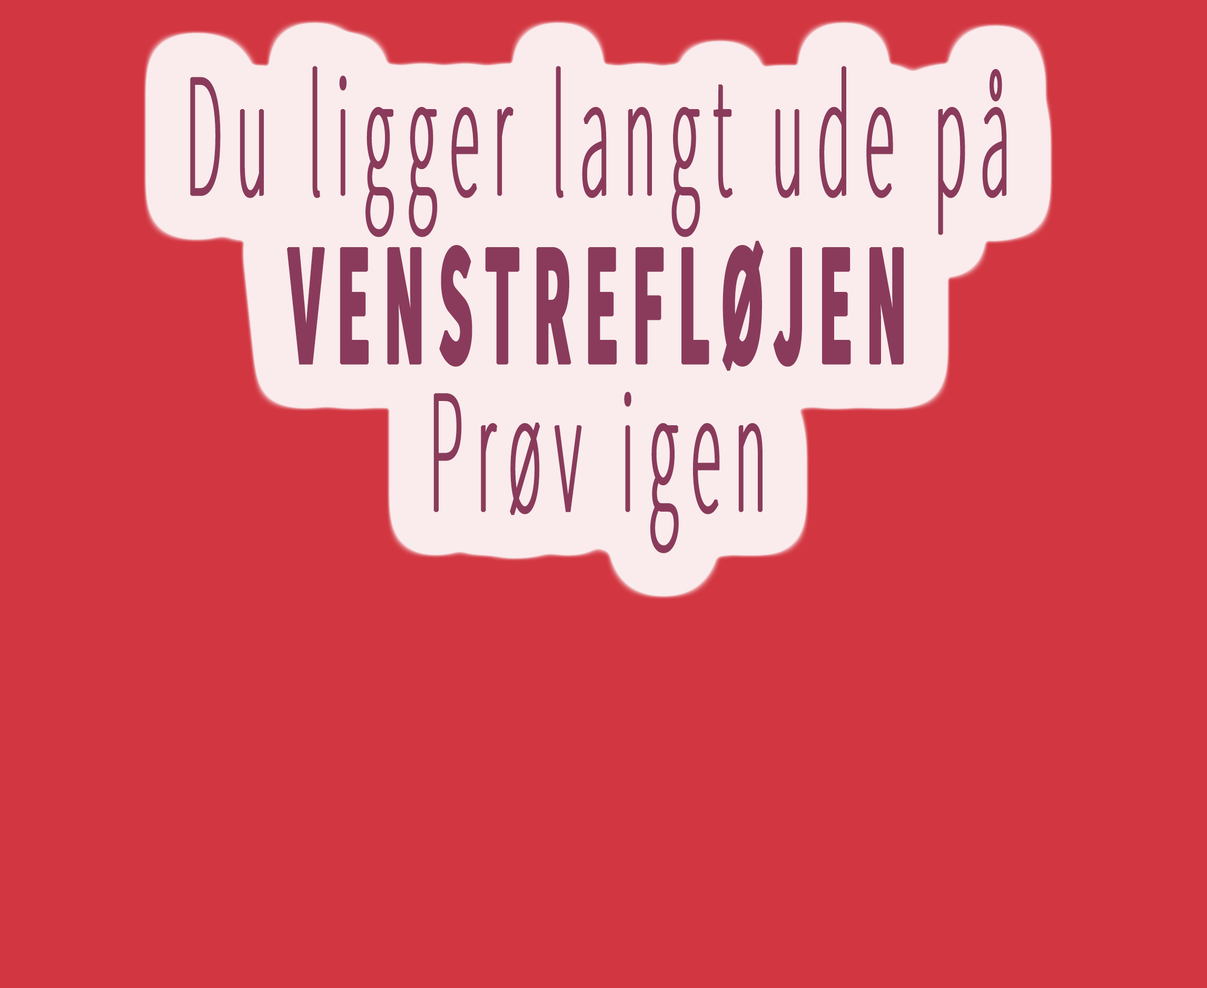
<style>
.page{position:relative;width:1207px;height:988px;background:#d23641}
.page>*{position:absolute;margin:0}
.t1{font:175.6px "SourceSansPro-ExtraLight";letter-spacing:0.2em;color:#8a3b5b;font-weight:bold;scale:0.35 1}
.t2{font:175.6px "SourceSansPro-Bold";letter-spacing:0.2em;color:#8a3b5b;font-weight:bold;scale:0.35 1}
</style>
<div class="page">
<p class="t1" style="left:190px;top:66px;width:817px;height:487px;text-align:center">Du ligger langt ude på<br><br><br><br><br><br><br><br><span class="t2">VENSTREFLØJEN<br></span><br><br><br><br><br><br>Prøv igen</p>
</div>
